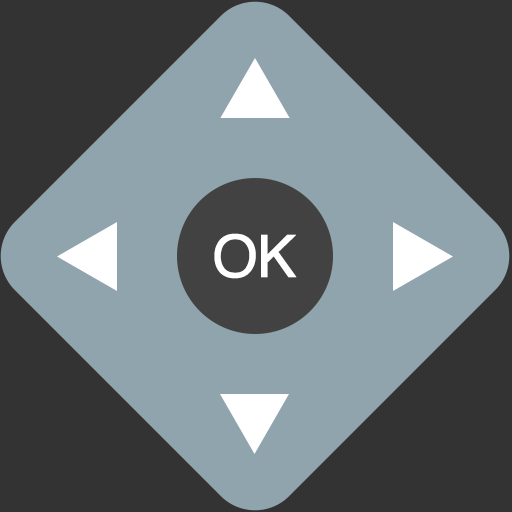
<style>
.page{position:relative;width:512px;height:512px;background:#90a4ae}
.page>*{position:absolute;margin:0}
.t1{font:58.3px "Helvetica";letter-spacing:-0.04em;color:#ffffff;font-weight:bold}
</style>
<div class="page">
<p class="t1" style="left:214px;top:233px;width:83px;height:46px">OK</p>
</div>
